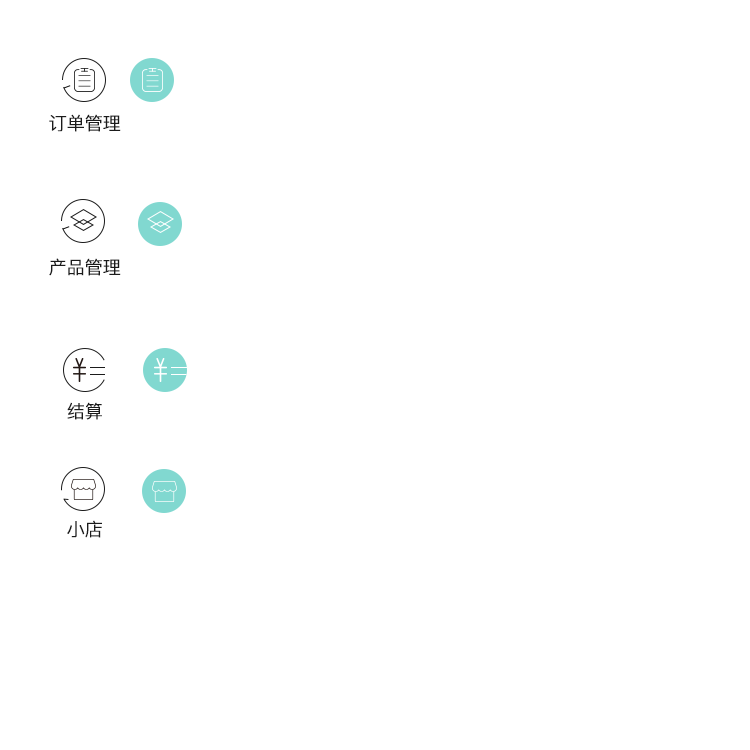
<style>
.page{position:relative;width:750px;height:750px;background:#ffffff}
.page>*{position:absolute;margin:0}
.t1{font:18px "PingFang-SC-Regular";color:#1b1b1b;font-weight:bold}
</style>
<div class="page">
<p class="t1" style="left:49px;top:114px;width:72px;height:18px">订单管理</p>
<p class="t1" style="left:49px;top:258px;width:72px;height:18px">产品管理</p>
<p class="t1" style="left:67px;top:402px;width:35px;height:18px">结算</p>
<p class="t1" style="left:67px;top:520px;width:35px;height:18px">小店</p>
</div>
